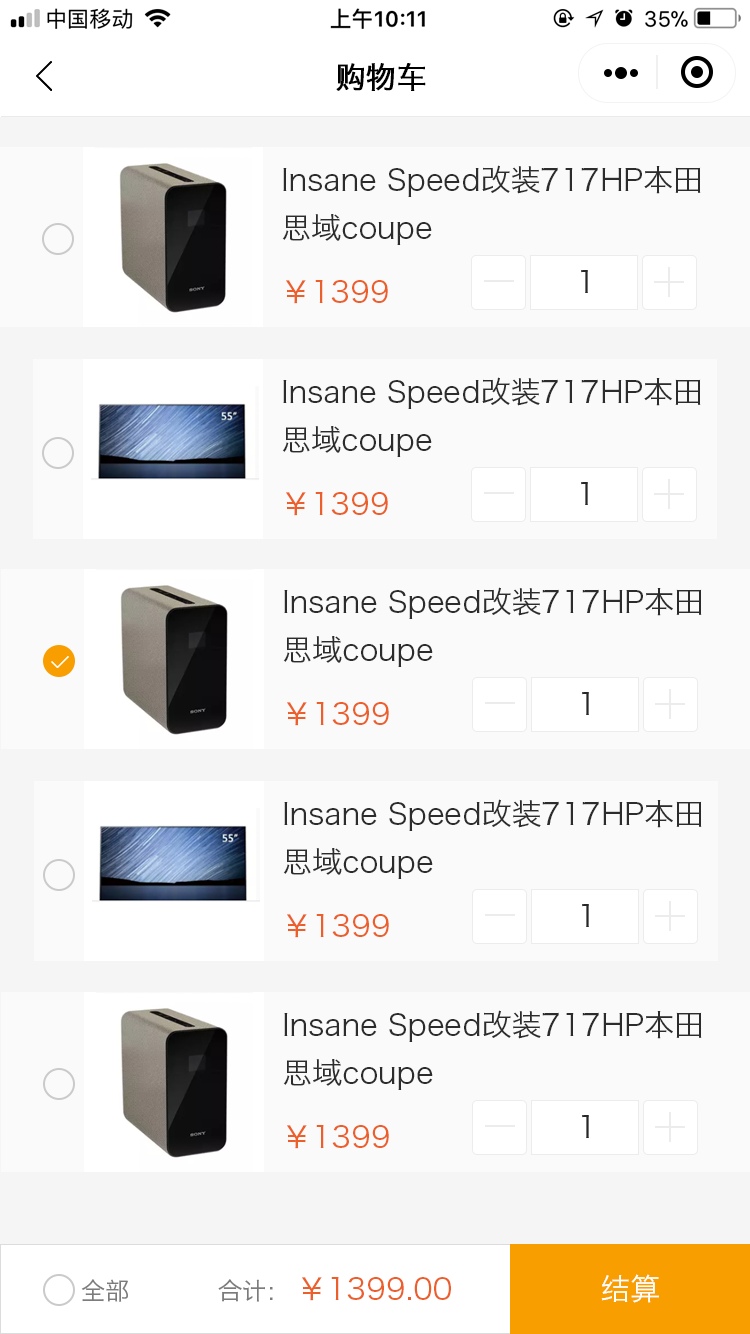
<style>
.page{position:relative;width:750px;height:1334px;background:#fafafa}
.page>*{position:absolute;margin:0}
.t1{font:30px "HiraginoSansGB-W3";color:#000000;text-transform:uppercase;font-weight:bold}
.t2{font:30px/48px "HiraginoSansGB-W3";color:#2c2c2c}
.t3{font:30px "HiraginoSansGB-W3";color:#262727;text-transform:uppercase}
.t4{font:30px "HiraginoSansGB-W3";color:#ec5e2a}
.t5{font:30px "HiraginoSansGB-W3";color:#ffffff;text-transform:uppercase}
.t6{font:24px "HiraginoSansGB-W3";color:#7c7c7c}
</style>
<div class="page">
<p class="t1" style="left:336px;top:63px;width:90px;height:28px">购物车</p>
<p class="t2" style="left:282px;top:165px;width:419px;height:80px">Insane Speed改装717HP本田<br>思域coupe</p>
<p class="t3" style="left:581px;top:270px;width:7px;height:23px">1</p>
<p class="t4" style="left:286px;top:280px;width:102px;height:24px">￥1399</p>
<p class="t2" style="left:282px;top:377px;width:419px;height:80px">Insane Speed改装717HP本田<br>思域coupe</p>
<p class="t3" style="left:581px;top:482px;width:7px;height:23px">1</p>
<p class="t4" style="left:286px;top:492px;width:102px;height:24px">￥1399</p>
<p class="t2" style="left:283px;top:587px;width:419px;height:80px">Insane Speed改装717HP本田<br>思域coupe</p>
<p class="t4" style="left:287px;top:702px;width:102px;height:24px">￥1399</p>
<p class="t3" style="left:582px;top:692px;width:7px;height:23px">1</p>
<p class="t2" style="left:283px;top:799px;width:419px;height:80px">Insane Speed改装717HP本田<br>思域coupe</p>
<p class="t3" style="left:582px;top:904px;width:7px;height:23px">1</p>
<p class="t4" style="left:287px;top:914px;width:102px;height:24px">￥1399</p>
<p class="t2" style="left:283px;top:1010px;width:419px;height:80px">Insane Speed改装717HP本田<br>思域coupe</p>
<p class="t3" style="left:582px;top:1115px;width:7px;height:23px">1</p>
<p class="t4" style="left:287px;top:1125px;width:102px;height:24px">￥1399</p>
<p class="t4" style="left:302px;top:1277px;width:149px;height:24px">￥1399.00</p>
<p class="t5" style="left:601px;top:1274px;width:58px;height:29px">结算</p>
<p class="t6" style="left:81px;top:1279px;width:47px;height:23px">全部</p>
<p class="t6" style="left:218px;top:1279px;width:55px;height:23px">合计：</p>
</div>
